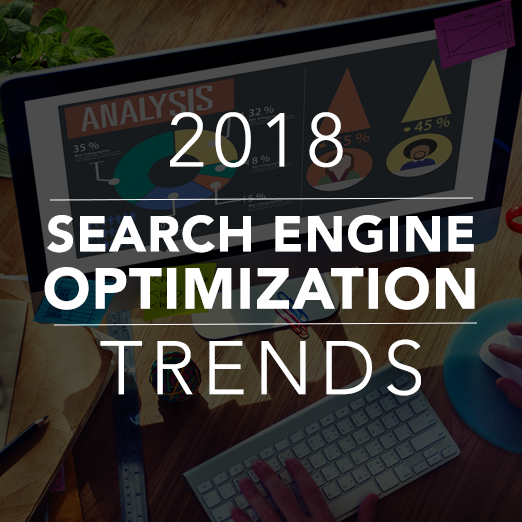
<style>
.page{position:relative;width:522px;height:522px}
.page>*{position:absolute;margin:0}
.t1{font:75px "Avenir-Light";letter-spacing:0.1em;color:#ffffff}
.t2{font:50px "Avenir-Black";letter-spacing:0.025em;color:#ffffff}
.t3{font:57px "Avenir-Black";letter-spacing:0.025em;color:#ffffff}
</style>
<div class="page">
<p class="t1" style="left:170px;top:112px;width:173px;height:56px">2018</p>
<p class="t2" style="left:47px;top:215px;width:427px;height:38px">SEARCH ENGINE</p>
<p class="t3" style="left:44px;top:267px;width:431px;height:43px">OPTIMIZATION</p>
<p class="t1" style="left:100px;top:339px;width:321px;height:57px">TRENDS</p>
</div>
